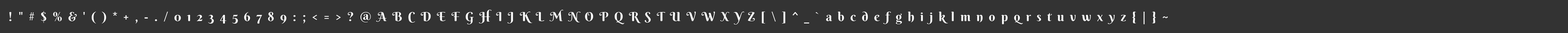
<style>
.page{position:relative;width:1568px;height:33px;background:#333333}
.page>*{position:absolute;margin:0}
.t1{font:12.7px "BerkshireSwash-Regular";color:#ffffff}
</style>
<div class="page">
<p class="t1" style="left:9px;top:10px;width:1159px;height:15px">!  "  #  $  %  &amp;  '  (  )  *  +  ,  -  .  /  0  1  2  3  4  5  6  7  8  9  :  ;  &lt;  =  &gt;  ?  @  A  B  C  D  E  F  G  H  I  J  K  L  M  N  O  P  Q  R  S  T  U  V  W  X  Y  Z  [  \  ]  ^  _  `  a  b  c  d  e  f  g  h  i  j  k  l  m  n  o  p  q  r  s  t  u  v  w  x  y  z  {  |  }  ~</p>
</div>
